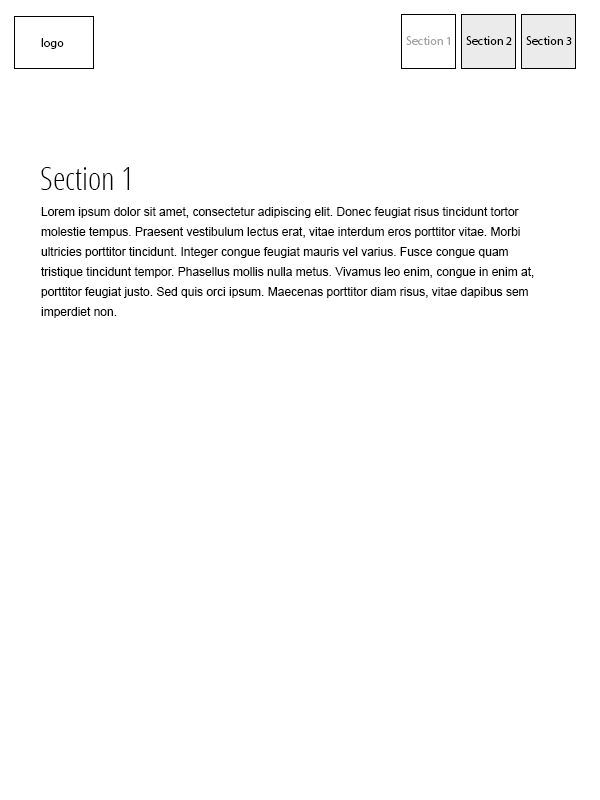
<style>
.page{position:relative;width:600px;height:800px;background:#ffffff}
.page>*{position:absolute;margin:0}
.t1{font:12px "MyriadPro-Regular";color:#000000}
.t2{font:12px "MyriadPro-Regular";color:#a3a3a3}
.t3{font:32px "OpenSans-CondensedLight";color:#000000}
.t4{font:12px/20px "ArialMT";color:#000000}
</style>
<div class="page">
<p class="t1" style="left:41px;top:38px;width:23px;height:11px">logo</p>
<p class="t2" style="left:406px;top:36px;width:44px;height:9px">Section 1</p>
<p class="t1" style="left:466px;top:36px;width:46px;height:9px">Section 2</p>
<p class="t1" style="left:526px;top:36px;width:46px;height:9px">Section 3</p>
<p class="t3" style="left:41px;top:167px;width:89px;height:23px">Section 1</p>
<p class="t4" style="left:41px;top:207px;width:493px;height:111px">Lorem ipsum dolor sit amet, consectetur adipiscing elit. Donec feugiat risus tincidunt tortor molestie tempus. Praesent vestibulum lectus erat, vitae interdum eros porttitor vitae. Morbi ultricies porttitor tincidunt. Integer congue feugiat mauris vel varius. Fusce congue quam tristique tincidunt tempor. Phasellus mollis nulla metus. Vivamus leo enim, congue in enim at, porttitor feugiat justo. Sed quis orci ipsum. Maecenas porttitor diam risus, vitae dapibus sem imperdiet non.</p>
</div>
